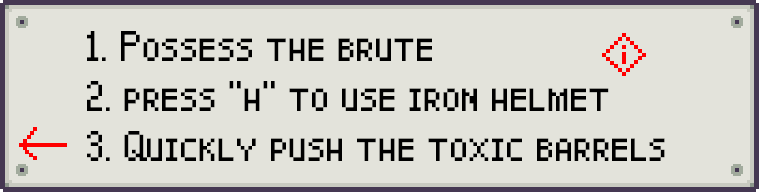
<style>
.page{position:relative;width:759px;height:192px;background:#e3e3db}
.page>*{position:absolute;margin:0}
.t1{font:30px "Pixel-Caps";color:#000000}
</style>
<div class="page">
<p class="t1" style="left:87px;top:31px;width:345px;height:30px">1. Possess the brute</p>
<p class="t1" style="left:87px;top:81px;width:522px;height:30px">2. press "h" to use iron helmet</p>
<p class="t1" style="left:87px;top:131px;width:578px;height:30px">3. Quickly push the toxic barrels</p>
</div>
